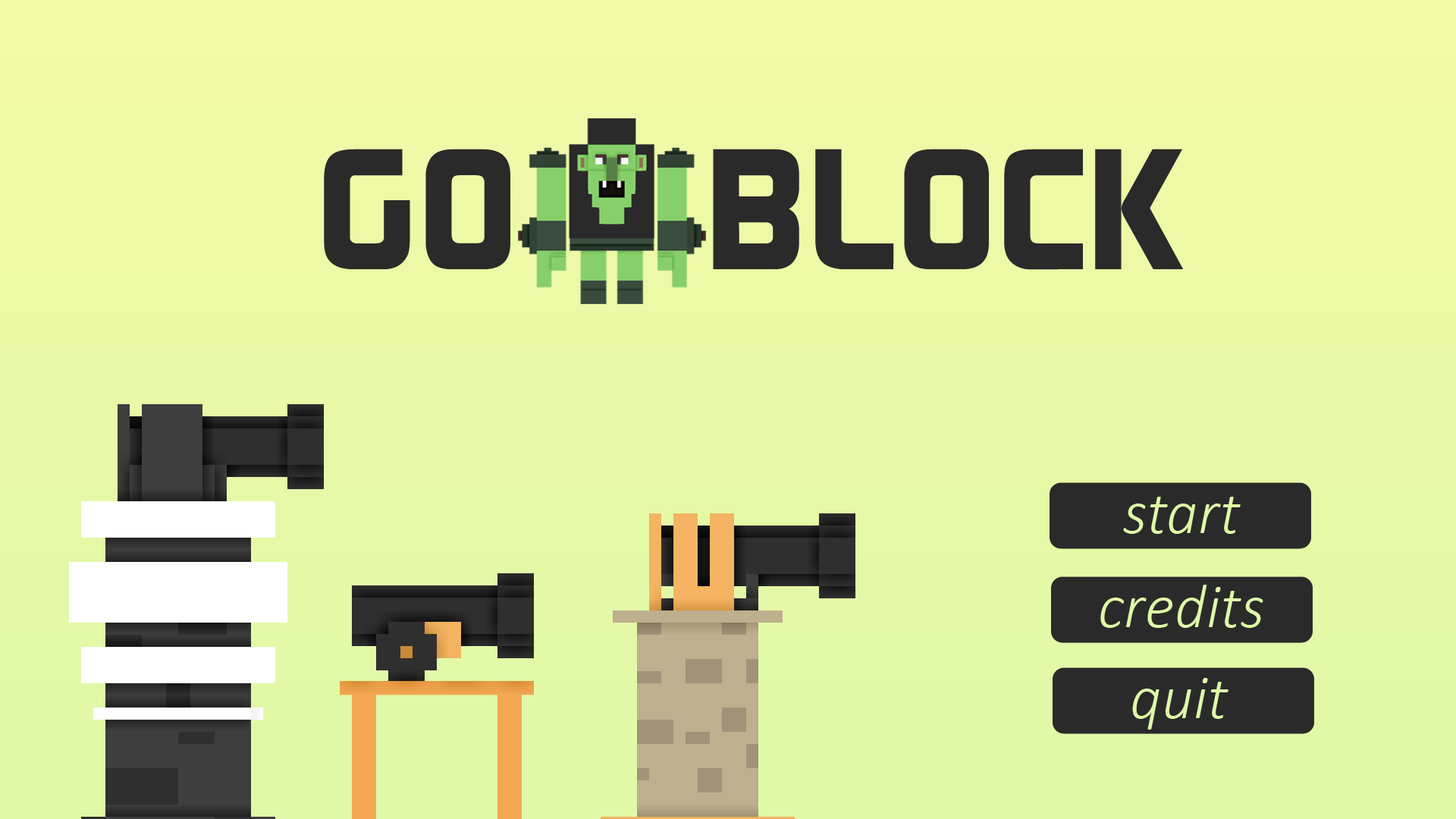
<style>
.page{position:relative;width:1456px;height:819px}
.page>*{position:absolute;margin:0}
.t1{font:171.3px "ContinuumBold";color:#2a2a2a}
.t2{font:62.5px "Calibri-LightItalic";color:#dff9a7}
</style>
<div class="page">
<p class="t1" style="left:324px;top:149px;width:186px;height:120px">GO</p>
<p class="t1" style="left:713px;top:149px;width:470px;height:121px">BLOCK</p>
<p class="t2" style="left:1123px;top:497px;width:118px;height:37px">start</p>
<p class="t2" style="left:1100px;top:585px;width:163px;height:43px">credits</p>
<p class="t2" style="left:1132px;top:678px;width:96px;height:52px">quit</p>
</div>
